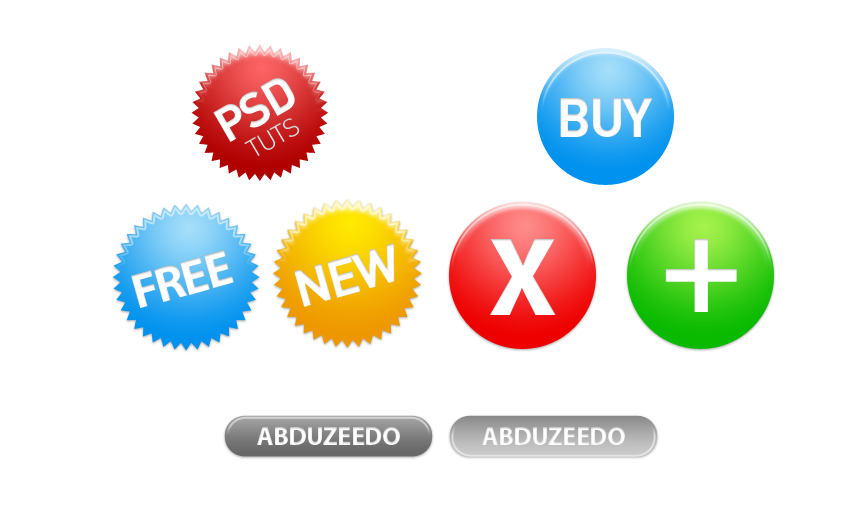
<style>
.page{position:relative;width:867px;height:513px;background:#ffffff}
.page>*{position:absolute;margin:0}
.t1{font:48.1px "DIN-BoldAlternate";letter-spacing:-0.05em;color:#ffffff;text-transform:uppercase}
.t2{font:53.7px "DIN-BoldAlternate";letter-spacing:-0.05em;color:#ffffff;text-transform:uppercase}
.t3{font:25.5px "DIN-LightAlternate";letter-spacing:-0.05em;color:#dedede;text-transform:uppercase}
.t4{font:51.7px "DIN-BoldAlternate";letter-spacing:-0.05em;color:#ffffff;text-transform:uppercase}
.t5{font:112.6px "MyriadPro-Bold";letter-spacing:-0.075em;color:#ffffff;text-transform:uppercase}
.t6{font:137.6px "MyriadPro-Bold";letter-spacing:-0.075em;color:#ffffff;text-transform:uppercase}
.t7{font:49.9px "MyriadPro-Bold";letter-spacing:-0.05em;color:#ffffff;text-transform:uppercase}
.t8{font:26.2px "MyriadPro-Bold";letter-spacing:-0.025em;color:#ffffff;text-transform:uppercase}
</style>
<div class="page">
<p class="t1" style="left:213px;top:78px;width:82px;height:64px;rotate:-30deg">psd</p>
<p class="t2" style="left:560px;top:98px;width:93px;height:39px">BUY</p>
<p class="t3" style="left:244px;top:118px;width:56px;height:38px;rotate:-30deg">tuts</p>
<p class="t4" style="left:294px;top:243px;width:101px;height:64px;rotate:-16deg">new</p>
<p class="t5" style="left:490px;top:239px;width:66px;height:76px">x</p>
<p class="t6" style="left:665px;top:239px;width:72px;height:73px">+</p>
<p class="t7" style="left:131px;top:250px;width:103px;height:58px;rotate:-16deg">free</p>
<p class="t8" style="left:257px;top:427px;width:143px;height:18px">abduzeedo</p>
<p class="t8" style="left:482px;top:427px;width:143px;height:18px">abduzeedo</p>
</div>
